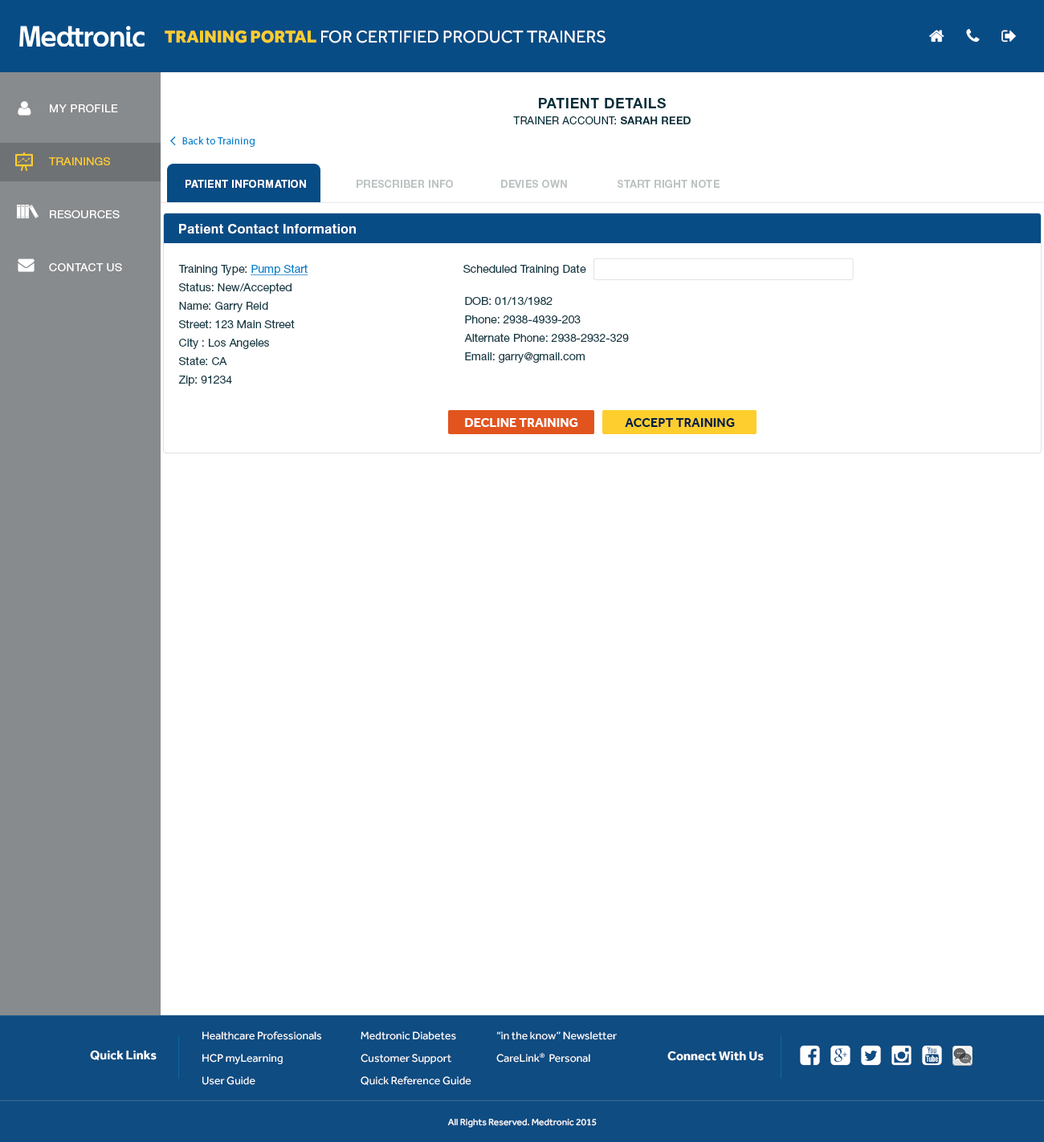
<style>
.page{position:relative;width:1044px;height:1142px;background:#ffffff}
.page>*{position:absolute;margin:0}
.t1{font:17.7px "Effra-Regular";color:#ffffff;text-transform:uppercase}
.t2{font:17.7px "Effra-Heavy";color:#fecd2e;text-transform:uppercase}
.t3{font:14.5px "HelveticaNeueLTStd-Bd";letter-spacing:0.025em;color:#032e3a;text-transform:uppercase}
.t4{font:11.2px/53px "HelveticaNeueLTStd-Roman";letter-spacing:0.025em;color:#ffffff;text-transform:uppercase}
.t5{font:11.2px/53px "HelveticaNeueLTStd-Roman";letter-spacing:0.025em;color:#fecd2e;text-transform:uppercase}
.t6{font:10.4px "HelveticaNeueLTStd-Roman";letter-spacing:0.025em;color:#032e3a}
.t7{font:10.4px "HelveticaNeueLTStd-Bd";letter-spacing:0.025em;color:#032e3a}
.t8{font:10.4px "MyriadPro-Regular";letter-spacing:0.025em;color:#0082cd}
.t9{font:12.8px "HelveticaNeueLTStd-Bd";letter-spacing:0.025em;color:#ffffff}
.t10{font:11.2px/18.5px "HelveticaNeueLTStd-Roman";color:#133944}
.t11{font:11.2px/18.5px "HelveticaNeueLTStd-Roman";color:#0082cd;text-decoration:underline}
.t12{font:11.2px "HelveticaNeueLTStd-Roman";color:#133944}
.t13{font:12.8px "Effra-Bold";color:#ffffff;text-transform:uppercase}
.t14{font:12.8px "Effra-Bold";color:#011f45;text-transform:uppercase}
.t15{font:11.2px/22.5px "Effra-Regular";color:#ffffff}
.t16{font:12.8px "Effra-Bold";color:#ffffff}
.t17{font:9.4px "Effra-Regular";color:#ffffff}
</style>
<div class="page">
<p class="t1" style="left:165px;top:31px;width:440px;height:12px"><span class="t2">Training Portal</span> for certified product trainers</p>
<p class="t3" style="left:539px;top:98px;width:127px;height:10px">Patient details</p>
<p class="t4" style="left:49px;top:104px;width:73px;height:167px">My Profile<br><span class="t5">Trainings<br></span>resources<br>contact us</p>
<p class="t6" style="left:513px;top:116px;width:177px;height:8px">TRAINER ACCOUNT: <span class="t7">SARAH REED</span></p>
<p class="t8" style="left:182px;top:136px;width:73px;height:11px">Back to Training</p>
<p class="t9" style="left:179px;top:224px;width:177px;height:10px">Patient Contact Information</p>
<p class="t10" style="left:178px;top:264px;width:130px;height:122px">Training Type: <span class="t11">Pump Start<br></span>Status: New/Accepted<br>Name: Garry Reid <br>Street: 123 Main Street<br>City : Los Angeles<br>State: CA<br>Zip: 91234</p>
<p class="t12" style="left:463px;top:264px;width:123px;height:11px">Scheduled Training Date</p>
<p class="t10" style="left:464px;top:296px;width:165px;height:67px">DOB: 01/13/1982<br>Phone: 2938-4939-203<br>Alternate Phone: 2938-2932-329<br>Email: garry@gmail.com</p>
<p class="t13" style="left:465px;top:418px;width:113px;height:9px">Decline training</p>
<p class="t14" style="left:625px;top:418px;width:110px;height:9px">accept training</p>
<p class="t15" style="left:202px;top:1032px;width:119px;height:53px">Healthcare Professionals<br>HCP myLearning<br>User Guide</p>
<p class="t15" style="left:360px;top:1032px;width:111px;height:54px;text-align:right">Medtronic Diabetes<br>Customer Support<br>Quick Reference Guide</p>
<p class="t15" style="left:496px;top:1032px;width:121px;height:31px">“in the know” Newsletter<br>CareLink®  Personal</p>
<p class="t16" style="left:90px;top:1051px;width:67px;height:10px">Quick Links</p>
<p class="t16" style="left:667px;top:1052px;width:97px;height:9px">Connect With Us</p>
<p class="t17" style="left:447px;top:1119px;width:150px;height:9px">2015 All Rights Reserved. Medtronic</p>
</div>
